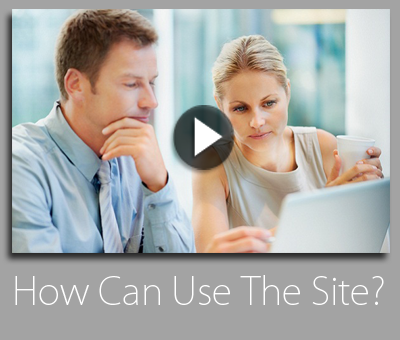
<style>
.page{position:relative;width:400px;height:340px;background:#a3a3a3}
.page>*{position:absolute;margin:0}
.t1{font:37.3px "KozGoPro-ExtraLight";color:#ffffff}
</style>
<div class="page">
<p class="t1" style="left:15px;top:275px;width:369px;height:30px">?How Can Use The Site</p>
</div>
